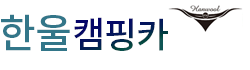
<style>
.page{position:relative;width:250px;height:70px;background:#ffffff}
.page>*{position:absolute;margin:0}
.t1{font:40px "NotoSansKR-Medium";letter-spacing:-0.025em;color:#337689}
.t2{font:36px "NotoSansKR-Medium";letter-spacing:-0.025em;color:#03175a}
</style>
<div class="page">
<p class="t1" style="left:1px;top:14px;width:69px;height:37px">한울</p>
<p class="t2" style="left:74px;top:17px;width:94px;height:34px">캠핑카</p>
</div>
